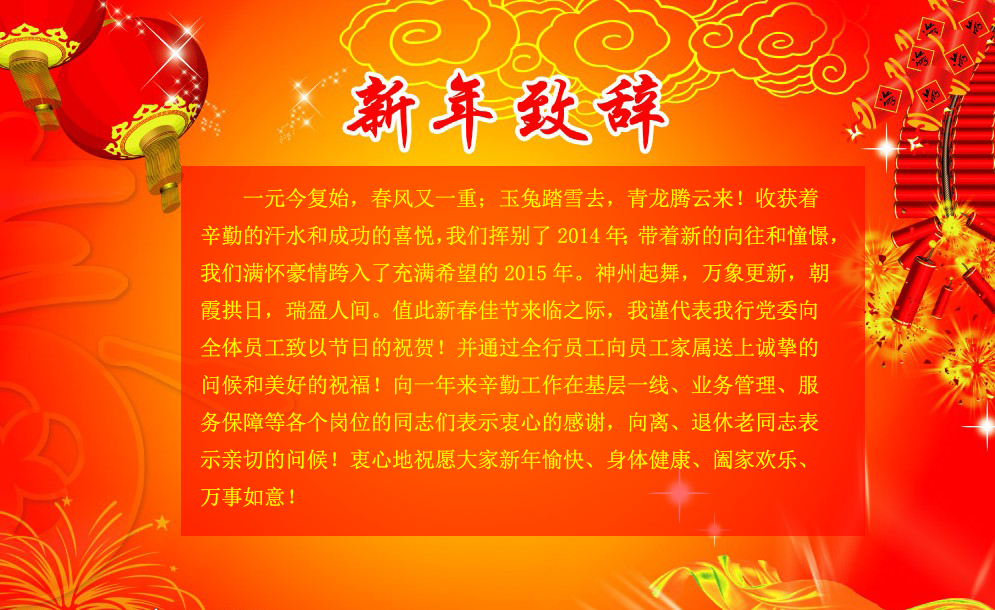
<style>
.page{position:relative;width:995px;height:610px}
.page>*{position:absolute;margin:0}
.t1{font:21.3px "SimSun";color:#fffc00}
</style>
<div class="page">
<p class="t1" style="left:200px;top:188px;width:636px;height:319px">一元今复始，春风又一重；玉兔踏雪去，青龙腾云来！收获着辛勤的汗水和成功的喜悦，我们挥别了2014年；带着新的向往和憧憬，我们满怀豪情跨入了充满希望的2015年。神州起舞，万象更新，朝霞拱日，瑞盈人间。值此新春佳节来临之际，我谨代表我行党委向全体员工致以节日的祝贺！并通过全行员工向员工家属送上诚挚的问候和美好的祝福！向一年来辛勤工作在基层一线、业务管理、服务保障等各个岗位的同志们表示衷心的感谢，向离、退休老同志表示亲切的问候！衷心地祝愿大家新年愉快、身体健康、阖家欢乐、万事如意！</p>
</div>
